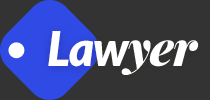
<style>
.page{position:relative;width:210px;height:100px;background:#333333}
.page>*{position:absolute;margin:0}
.t1{font:48px "Lato-BlackItalic";letter-spacing:-0.02em;color:#ffffff}
.t2{font:48px "PlayfairDisplay-BlackItalic";letter-spacing:-0.02em;color:#ffffff}
</style>
<div class="page">
<p class="t1" style="left:48px;top:31px;width:151px;height:44px">Law<span class="t2">yer</span></p>
</div>
